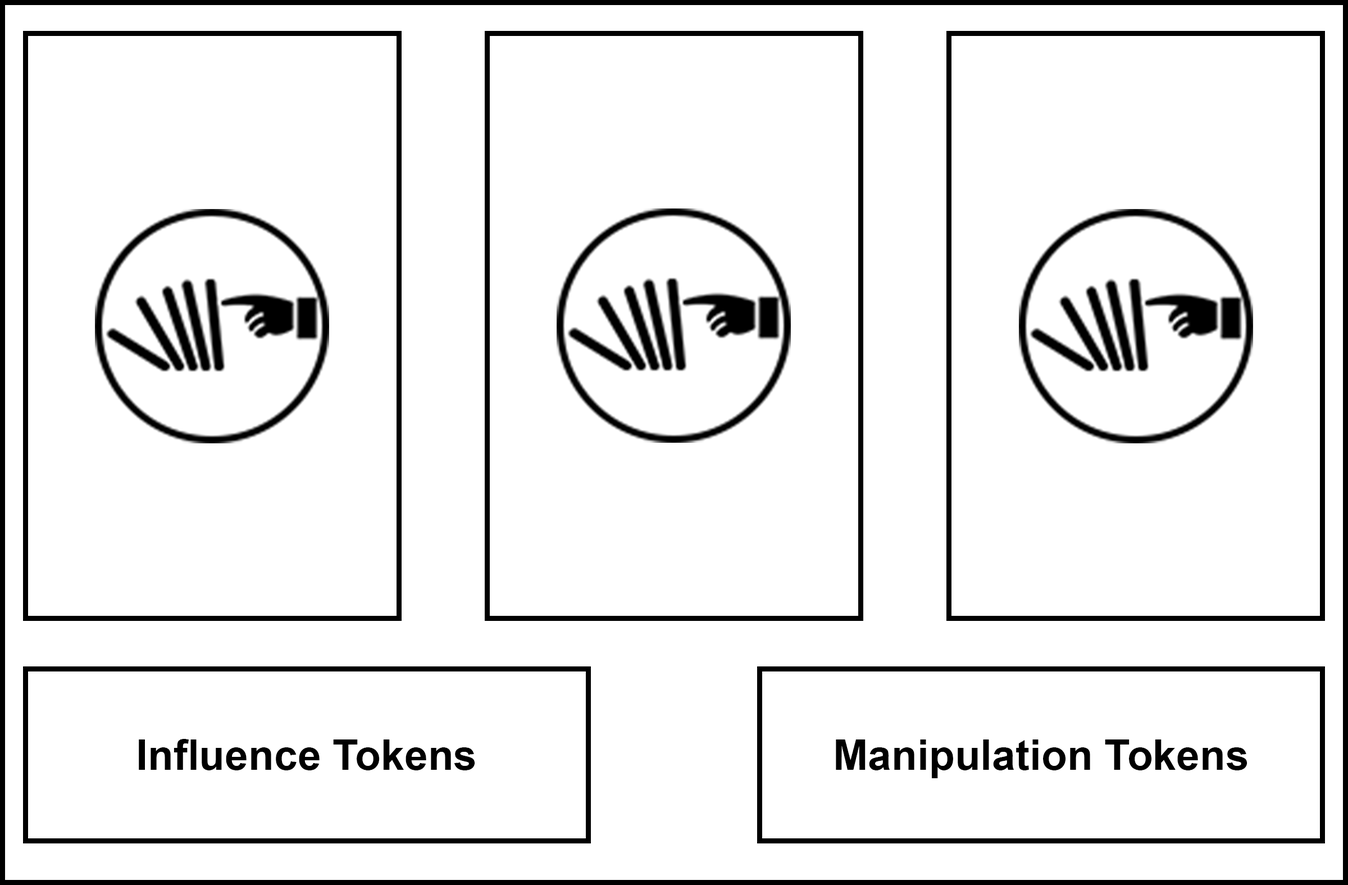
<style>
.page{position:relative;width:1348px;height:885px;background:#ffffff}
.page>*{position:absolute;margin:0}
.t1{font:42.1px "Arial-BoldMT";color:#000000}
</style>
<div class="page">
<p class="t1" style="left:139px;top:739px;width:336px;height:31px">Influence Tokens</p>
<p class="t1" style="left:836px;top:739px;width:411px;height:39px">Manipulation Tokens</p>
</div>
